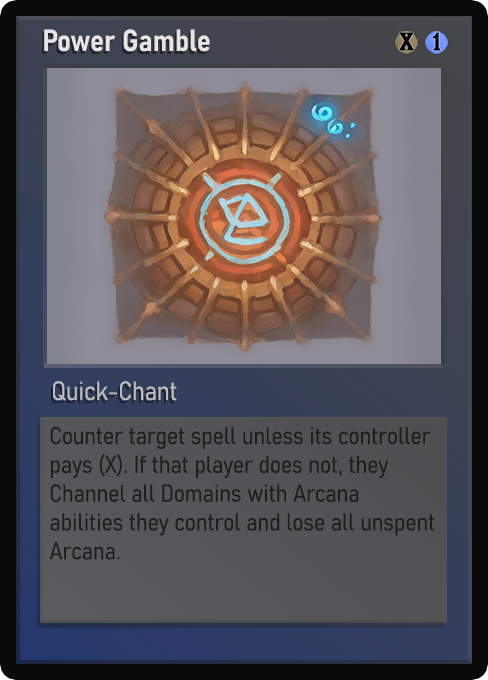
<style>
.page{position:relative;width:488px;height:680px}
.page>*{position:absolute;margin:0}
.t1{font:30px "Bahnschrift-SemiBoldSemiCondensed";color:#f2f2f2;font-weight:bold}
.t2{font:25px "WTRRoycroft";color:#000000;font-weight:bold;scale:1.09 1}
.t3{font:26px "Bahnschrift-LightSemiCondensed";color:#c8c8c8;font-weight:bold}
.t4{font:24px "Bahnschrift-LightSemiCondensed";color:#1e1e1e;font-weight:bold}
</style>
<div class="page">
<p class="t1" style="left:44px;top:29px;width:166px;height:23px;opacity:0.9">Power Gamble</p>
<p class="t2" style="left:399px;top:32px;width:15px;height:19px">X</p>
<p class="t2" style="left:432px;top:32px;width:9px;height:19px">1</p>
<p class="t3" style="left:53px;top:381px;width:124px;height:20px;opacity:0.9">Quick-Chant</p>
<p class="t4" style="left:49px;top:426px;width:386px;height:134px">Counter target spell unless its controller pays (X). If that player does not, they Channel all Domains with Arcana abilities they control and lose all unspent Arcana.</p>
</div>
